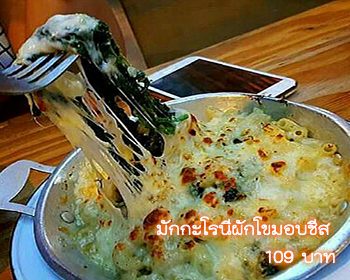
<style>
.page{position:relative;width:350px;height:280px}
.page>*{position:absolute;margin:0}
.t1{font:24px "THKodchasal";color:#ffffff}
</style>
<div class="page">
<p class="t1" style="left:156px;top:216px;width:179px;height:48px;text-align:right">มักกะโรนีผักโขมอบชีส<br>บาท 109</p>
</div>
